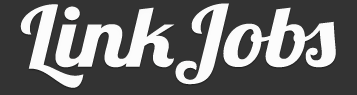
<style>
.page{position:relative;width:357px;height:95px;background:#333333}
.page>*{position:absolute;margin:0}
.t1{font:84.1px "Lobster1.4";color:#fcfcfc;scale:1.13 1}
</style>
<div class="page">
<p class="t1" style="left:20px;top:3px;width:316px;height:85px">LinkJobs</p>
</div>
